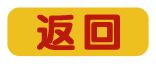
<style>
.page{position:relative;width:156px;height:64px;background:#edbf1f}
.page>*{position:absolute;margin:0}
.t1{font:40px "JCuYuan";letter-spacing:0.15em;color:#bc180c;font-weight:bold}
</style>
<div class="page">
<p class="t1" style="left:37px;top:14px;width:83px;height:36px">返回</p>
</div>
